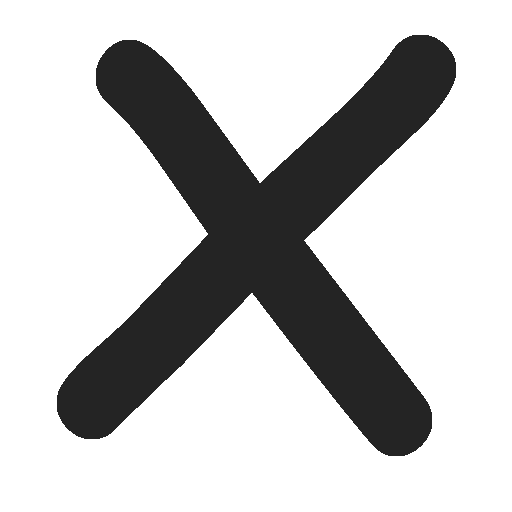
<style>
.page{position:relative;width:512px;height:512px;background:#ffffff}
.page>*{position:absolute;margin:0}
.t1{font:750px "ComicSansMS";letter-spacing:-0.035em;color:#242424}
</style>
<div class="page">
<p class="t1" style="left:57px;top:35px;width:399px;height:421px">x</p>
</div>
